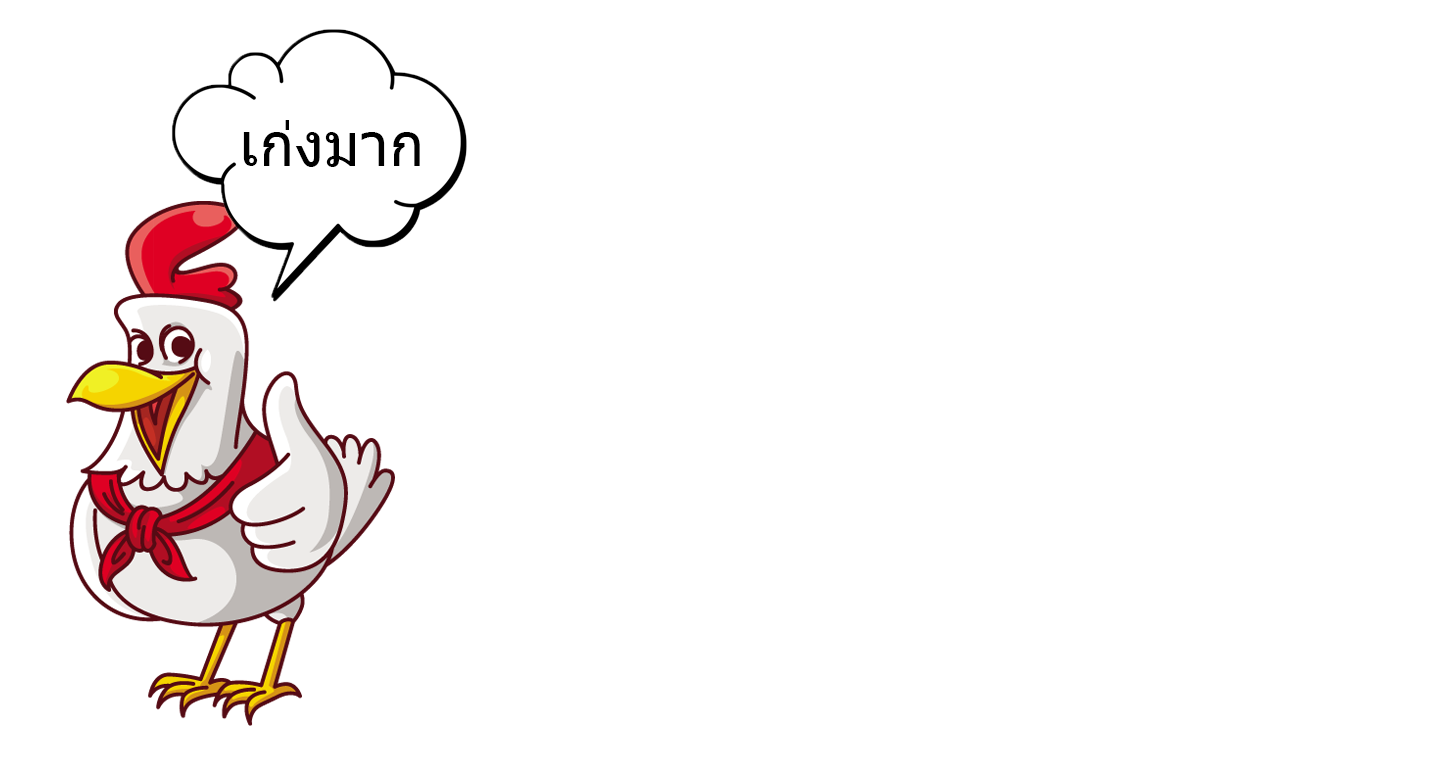
<style>
.page{position:relative;width:1452px;height:784px;background:#ffffff}
.page>*{position:absolute;margin:0}
.t1{font:60px "Tahoma";color:#000000}
</style>
<div class="page">
<p class="t1" style="left:243px;top:120px;width:177px;height:47px">เก่งมาก</p>
</div>
